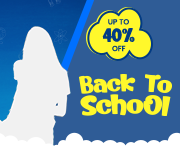
<style>
.page{position:relative;width:180px;height:150px;background:#2f5c96}
.page>*{position:absolute;margin:0}
.t1{font:18.6px "Kerokero";color:#023c85}
.t2{font:7.4px "Poppins-Medium";color:#023c85}
.t3{font:23.6px "Kerokero";letter-spacing:-0.02em;color:#fff82b;scale:1.15 1}
.t4{font:26.7px "Kerokero";letter-spacing:-0.02em;color:#fff82b;scale:1.15 1}
</style>
<div class="page">
<p class="t1" style="left:102px;top:28px;width:33px;height:14px">40%</p>
<p class="t2" style="left:108px;top:19px;width:21px;height:6px">UP TO</p>
<p class="t2" style="left:112px;top:45px;width:14px;height:7px">OFF</p>
<p class="t3" style="left:78px;top:73px;width:95px;height:21px">Back To</p>
<p class="t4" style="left:80px;top:94px;width:91px;height:22px">SchoOl</p>
</div>
